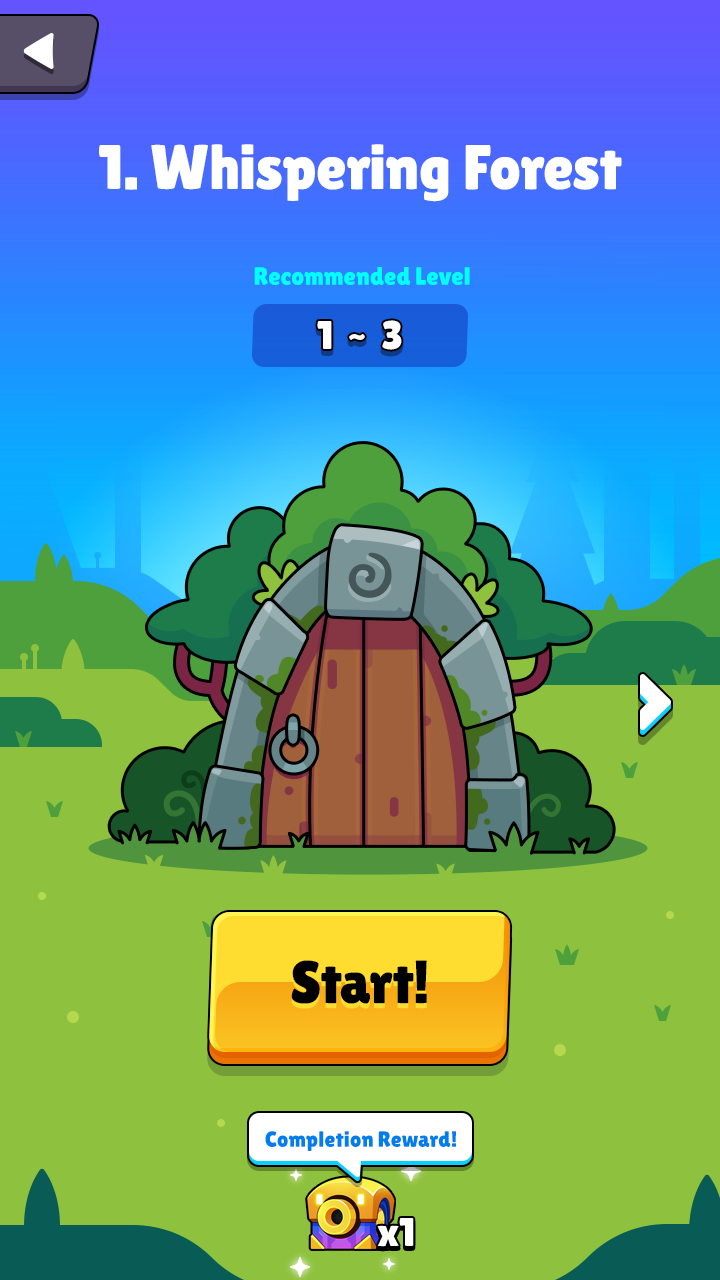
<style>
.page{position:relative;width:720px;height:1280px;background:#8ec13d}
.page>*{position:absolute;margin:0}
.t1{font:63px "LilitaOne";color:#ffffff}
.t2{font:25px "LilitaOne";color:#00ffff}
.t3{font:40px "LilitaOne";color:#ffffff}
.t4{font:60px "LilitaOne";color:#000000}
.t5{font:22px "LilitaOne";color:#007def}
</style>
<div class="page">
<p class="t1" style="left:99px;top:144px;width:523px;height:58px">1. Whispering Forest</p>
<p class="t2" style="left:254px;top:267px;width:216px;height:18px">Recommended Level</p>
<p class="t3" style="left:317px;top:320px;width:85px;height:30px">1  ~  3</p>
<p class="t4" style="left:291px;top:960px;width:136px;height:44px">Start!</p>
<p class="t5" style="left:265px;top:1131px;width:191px;height:20px">Completion Reward!</p>
<p class="t3" style="left:377px;top:1218px;width:37px;height:29px">x1</p>
</div>
